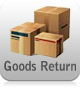
<style>
.page{position:relative;width:80px;height:89px}
.page>*{position:absolute;margin:0}
.t1{font:12.8px "BellGothicStd-Bold";color:#525252}
</style>
<div class="page">
<p class="t1" style="left:4px;top:60px;width:72px;height:11px">Goods Return</p>
</div>
